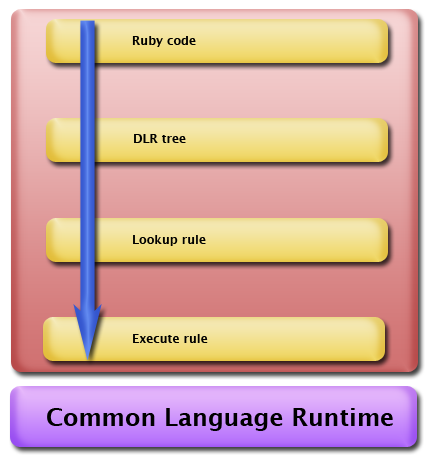
<style>
.page{position:relative;width:436px;height:463px}
.page>*{position:absolute;margin:0}
.t1{font:12px "LucidaGrande-Bold";color:#000000}
.t2{font:24px "LucidaGrande-Bold";color:#000000}
</style>
<div class="page">
<p class="t1" style="left:132px;top:36px;width:64px;height:11px">Ruby code</p>
<p class="t1" style="left:134px;top:134px;width:52px;height:9px">DLR tree</p>
<p class="t1" style="left:133px;top:235px;width:73px;height:11px">Lookup rule</p>
<p class="t1" style="left:133px;top:334px;width:75px;height:9px">Execute rule</p>
<p class="t2" style="left:47px;top:408px;width:346px;height:23px">Common Language Runtime</p>
</div>
